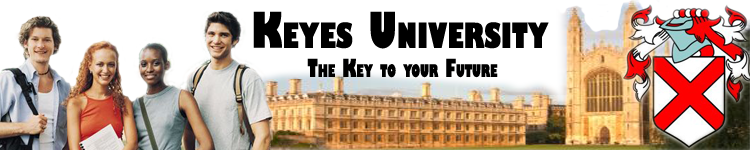
<style>
.page{position:relative;width:750px;height:150px;background:#ffffff}
.page>*{position:absolute;margin:0}
.t1{font:48px "GillSans-UltraBoldCondensed";color:#000000;font-variant:small-caps}
.t2{font:24px "GillSans-UltraBoldCondensed";color:#000000;font-variant:small-caps;scale:0.9 1}
</style>
<div class="page">
<p class="t1" style="left:253px;top:11px;width:296px;height:38px">Keyes University</p>
<p class="t2" style="left:307px;top:58px;width:191px;height:20px">The Key to your Future</p>
</div>
